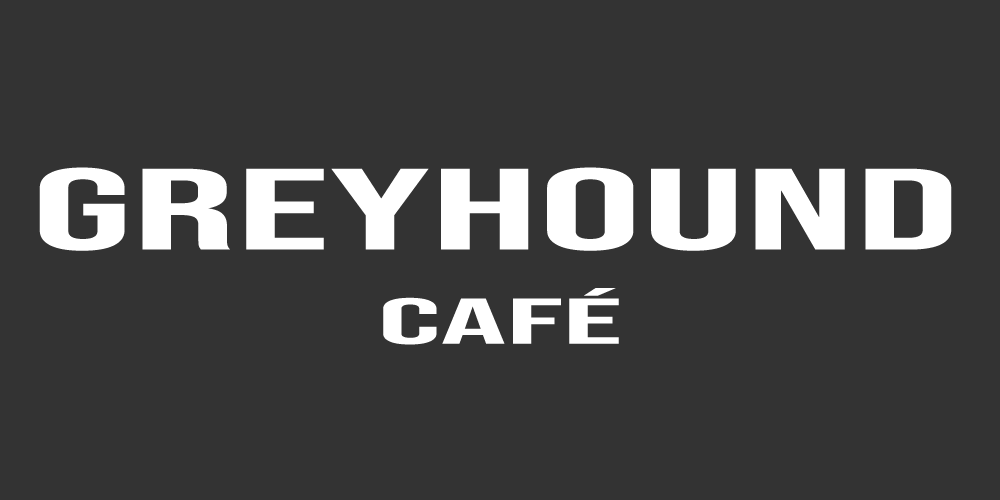
<style>
.page{position:relative;width:1000px;height:500px;background:#333333}
.page>*{position:absolute;margin:0}
.t1{font:115.3px "BebasNeue-Regular";color:#ffffff;scale:2.23 1}
.t2{font:64.4px "BebasNeue-Regular";color:#ffffff;scale:2.55 1}
</style>
<div class="page">
<p class="t1" style="left:39px;top:167px;width:913px;height:84px">GREYHOUND</p>
<p class="t2" style="left:383px;top:288px;width:236px;height:57px">CAFé</p>
</div>
